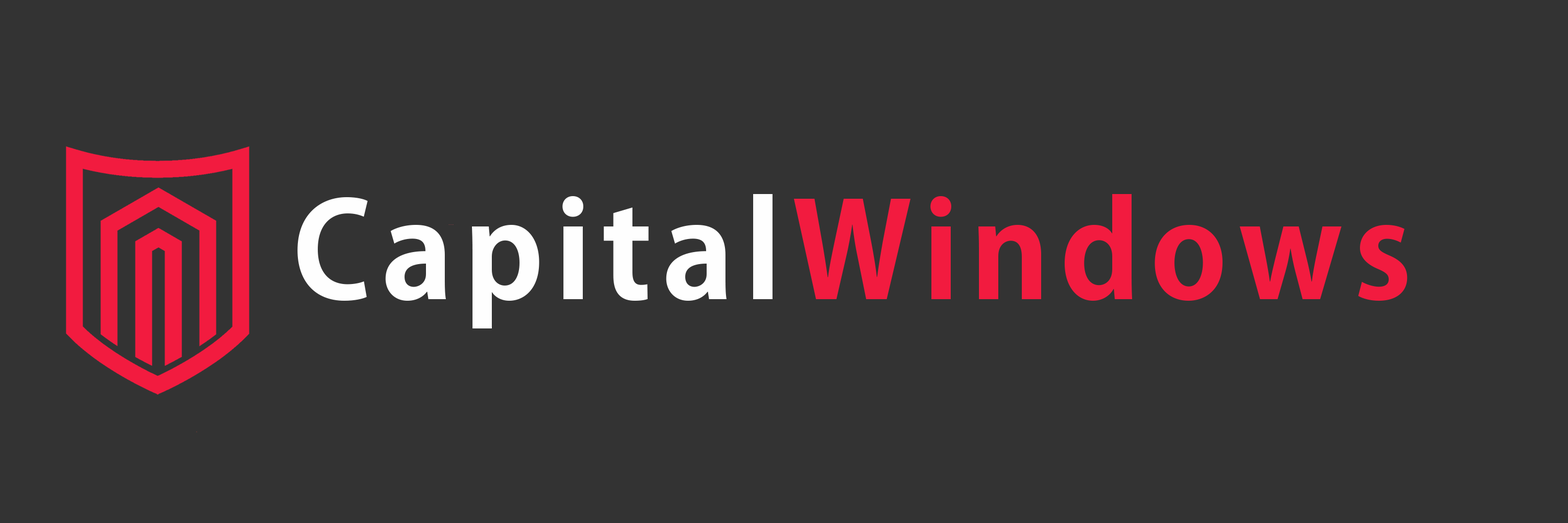
<style>
.page{position:relative;width:1568px;height:523px;background:#333333}
.page>*{position:absolute;margin:0}
.t1{font:130.7px "KozGoPr6N-Bold";letter-spacing:0.08em;color:#fefefe}
.t2{font:130.7px "KozGoPr6N-Bold";letter-spacing:0.08em;color:#f21b3f}
</style>
<div class="page">
<p class="t1" style="left:297px;top:194px;width:1111px;height:134px">Capital<span class="t2">Windows</span></p>
</div>
